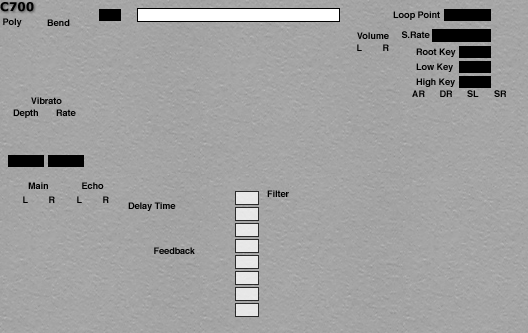
<style>
.page{position:relative;width:528px;height:333px}
.page>*{position:absolute;margin:0}
.t1{font:12px "Verdana-Bold";color:#000000}
.t2{font:9px "Helvetica-Bold";color:#000000}
</style>
<div class="page">
<p class="t1" style="left:0px;top:2px;width:34px;height:10px">C700</p>
<p class="t2" style="left:393px;top:11px;width:47px;height:9px">Loop Point</p>
<p class="t2" style="left:3px;top:18px;width:19px;height:9px">Poly</p>
<p class="t2" style="left:47px;top:19px;width:23px;height:7px">Bend</p>
<p class="t2" style="left:357px;top:32px;width:32px;height:7px">Volume</p>
<p class="t2" style="left:402px;top:31px;width:28px;height:7px">S.Rate</p>
<p class="t2" style="left:357px;top:44px;width:5px;height:7px">L</p>
<p class="t2" style="left:383px;top:44px;width:6px;height:7px">R</p>
<p class="t2" style="left:416px;top:48px;width:40px;height:9px">Root Key</p>
<p class="t2" style="left:416px;top:63px;width:37px;height:9px">Low Key</p>
<p class="t2" style="left:416px;top:78px;width:39px;height:9px">High Key</p>
<p class="t2" style="left:31px;top:97px;width:31px;height:7px">Vibrato</p>
<p class="t2" style="left:412px;top:90px;width:13px;height:7px">AR</p>
<p class="t2" style="left:440px;top:90px;width:12px;height:7px">DR</p>
<p class="t2" style="left:467px;top:90px;width:12px;height:7px">SL</p>
<p class="t2" style="left:494px;top:90px;width:12px;height:7px">SR</p>
<p class="t2" style="left:13px;top:109px;width:25px;height:9px">Depth</p>
<p class="t2" style="left:56px;top:109px;width:20px;height:7px">Rate</p>
<p class="t2" style="left:28px;top:182px;width:20px;height:7px">Main</p>
<p class="t2" style="left:82px;top:182px;width:22px;height:7px">Echo</p>
<p class="t2" style="left:23px;top:196px;width:5px;height:7px">L</p>
<p class="t2" style="left:49px;top:196px;width:6px;height:7px">R</p>
<p class="t2" style="left:77px;top:196px;width:5px;height:7px">L</p>
<p class="t2" style="left:103px;top:196px;width:6px;height:7px">R</p>
<p class="t2" style="left:267px;top:190px;width:22px;height:7px">Filter</p>
<p class="t2" style="left:128px;top:202px;width:48px;height:9px">Delay Time</p>
<p class="t2" style="left:154px;top:247px;width:41px;height:7px">Feedback</p>
</div>
